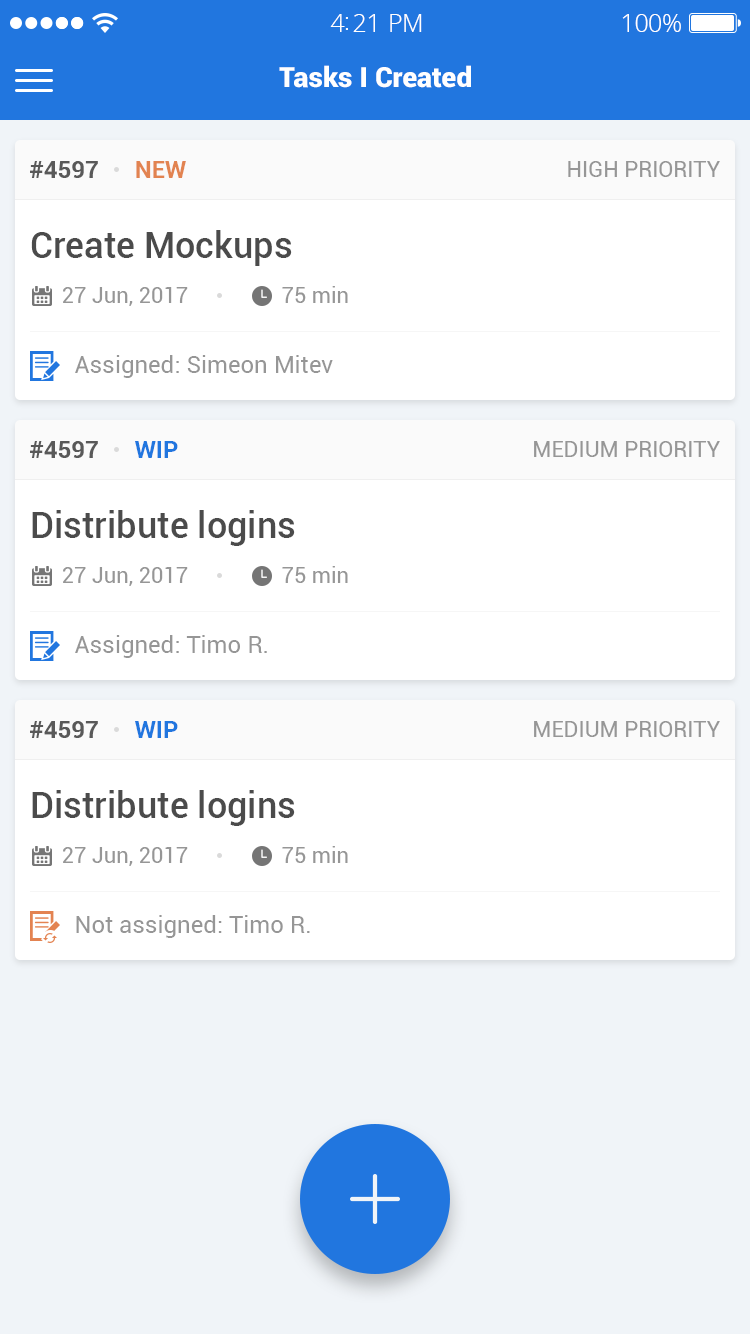
<style>
.page{position:relative;width:750px;height:1334px;background:#ffffff}
.page>*{position:absolute;margin:0}
.t1{font:25px "OpenSans-Light";letter-spacing:-0.02em;color:#ffffff}
.t2{font:28px "Roboto-Black";color:#ffffff}
.t3{font:24px "Roboto-Bold";color:#595959;text-transform:uppercase}
.t4{font:24px "Roboto-Bold";color:#e28350;text-transform:uppercase}
.t5{font:22px "Roboto-Regular";color:#969696;text-transform:uppercase}
.t6{font:36px "Roboto-Medium";color:#4b4b4b}
.t7{font:22px "Roboto-Regular";color:#969696}
.t8{font:24px "Roboto-Regular";color:#969696}
.t9{font:24px "Roboto-Bold";color:#2176df;text-transform:uppercase}
</style>
<div class="page">
<p class="t1" style="left:330px;top:14px;width:92px;height:18px">4:21 PM</p>
<p class="t1" style="left:622px;top:14px;width:59px;height:18px">100%</p>
<p class="t2" style="left:279px;top:65px;width:192px;height:23px">Tasks I Created</p>
<p class="t3" style="left:30px;top:161px;width:156px;height:17px">#4597      <span class="t4">NEW</span></p>
<p class="t5" style="left:568px;top:161px;width:152px;height:16px">high Priority</p>
<p class="t6" style="left:31px;top:230px;width:261px;height:36px">Create Mockups</p>
<p class="t7" style="left:63px;top:287px;width:125px;height:19px">27 Jun, 2017</p>
<p class="t7" style="left:282px;top:286px;width:66px;height:17px">75 min</p>
<p class="t8" style="left:75px;top:355px;width:258px;height:23px">Assigned: Simeon Mitev</p>
<p class="t3" style="left:30px;top:441px;width:148px;height:17px">#4597      <span class="t9">WIP</span></p>
<p class="t5" style="left:534px;top:441px;width:186px;height:16px">medium Priority</p>
<p class="t6" style="left:32px;top:510px;width:263px;height:36px">Distribute logins</p>
<p class="t7" style="left:63px;top:567px;width:125px;height:19px">27 Jun, 2017</p>
<p class="t7" style="left:282px;top:566px;width:66px;height:17px">75 min</p>
<p class="t8" style="left:75px;top:635px;width:192px;height:23px">Assigned: Timo R.</p>
<p class="t3" style="left:30px;top:721px;width:148px;height:17px">#4597      <span class="t9">WIP</span></p>
<p class="t5" style="left:534px;top:721px;width:186px;height:16px">medium Priority</p>
<p class="t6" style="left:32px;top:790px;width:263px;height:36px">Distribute logins</p>
<p class="t7" style="left:282px;top:846px;width:66px;height:17px">75 min</p>
<p class="t7" style="left:63px;top:847px;width:125px;height:19px">27 Jun, 2017</p>
<p class="t8" style="left:76px;top:915px;width:234px;height:23px">Not assigned: Timo R.</p>
</div>
